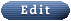
<style>
.page{position:relative;width:71px;height:21px;background:#ffffff}
.page>*{position:absolute;margin:0}
.t1{font:12px "Caecilia-Heavy";letter-spacing:0.15em;color:#ffffff}
</style>
<div class="page">
<p class="t1" style="left:21px;top:4px;width:29px;height:11px">Edit</p>
</div>
